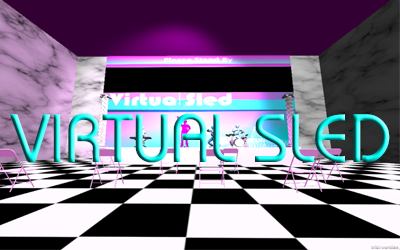
<style>
.page{position:relative;width:400px;height:250px}
.page>*{position:absolute;margin:0}
.t1{font:68px "Bauhaus"}
</style>
<div class="page">
<p class="t1" style="left:10px;top:113px;width:380px;height:50px">VIRTUAL SLED</p>
</div>
